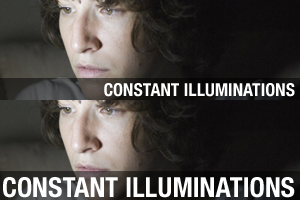
<style>
.page{position:relative;width:300px;height:200px}
.page>*{position:absolute;margin:0}
.t1{font:18px "HelveticaNeue-CondensedBold";color:#ffffff;text-transform:uppercase}
.t2{font:27.5px "HelveticaNeue-CondensedBold";color:#ffffff;text-transform:uppercase}
</style>
<div class="page">
<p class="t1" style="left:104px;top:83px;width:191px;height:14px">CONSTANT ILLUMINATIONS</p>
<p class="t2" style="left:3px;top:177px;width:292px;height:21px">CONSTANT ILLUMINATIONS</p>
</div>
